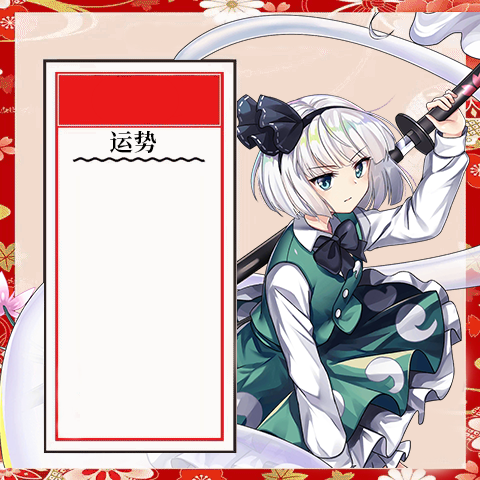
<style>
.page{position:relative;width:480px;height:480px;background:#fcfaf9}
.page>*{position:absolute;margin:0}
.t1{font:24px "NotoSerifSC-Bold";color:#000000}
</style>
<div class="page">
<p class="t1" style="left:110px;top:130px;width:46px;height:23px">运势</p>
</div>
